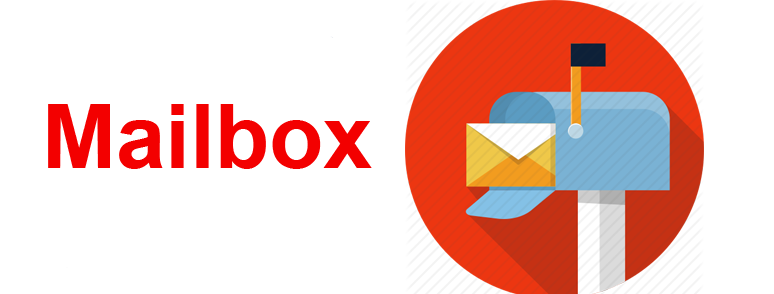
<style>
.page{position:relative;width:774px;height:294px;background:#ffffff}
.page>*{position:absolute;margin:0}
.t1{font:89px "Arial-BoldMT";color:#f30000}
</style>
<div class="page">
<p class="t1" style="left:48px;top:104px;width:324px;height:65px">Mailbox</p>
</div>
